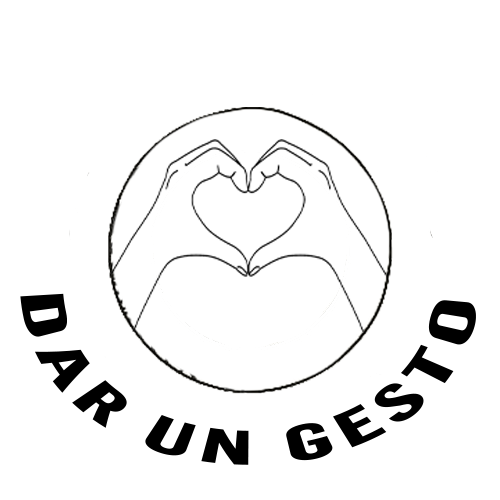
<style>
.page{position:relative;width:500px;height:500px;background:#ffffff}
.page>*{position:absolute;margin:0}
.t1{font:48px "FlamaCondensed-Bold";letter-spacing:0.075em;color:#000000;scale:1.26 1}
</style>
<div class="page">
<p class="t1" style="left:20px;top:293px;width:456px;height:172px;text-align:center">DAR UN GESTO</p>
</div>
